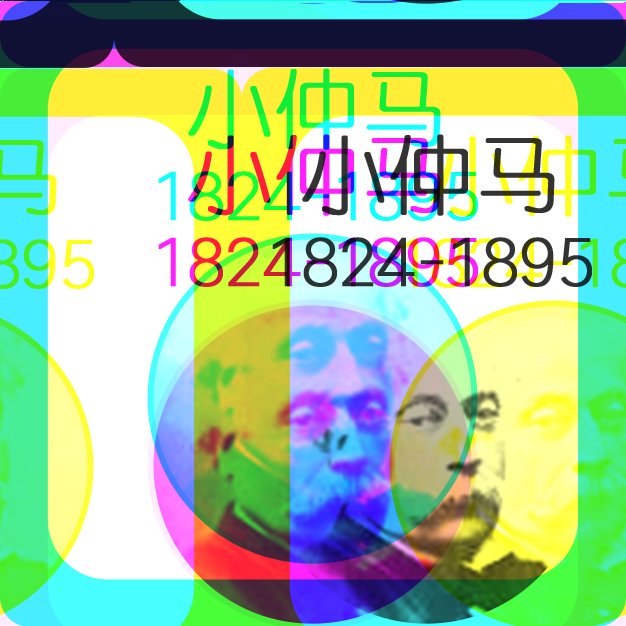
<style>
.page{position:relative;width:626px;height:626px}
.page>*{position:absolute;margin:0}
.t1{font:85.2px "YouYuan";color:#12ed38;font-weight:bold}
.t2{font:63.8px "MI-LANTING--GBK1-Light";font-weight:bold}
</style>
<div class="page">
<p class="t1" style="left:188px;top:67px;width:253px;height:82px">小仲马</p>
<p class="t2" style="left:158px;top:170px;width:320px;height:50px">1824-1895</p>
</div>
